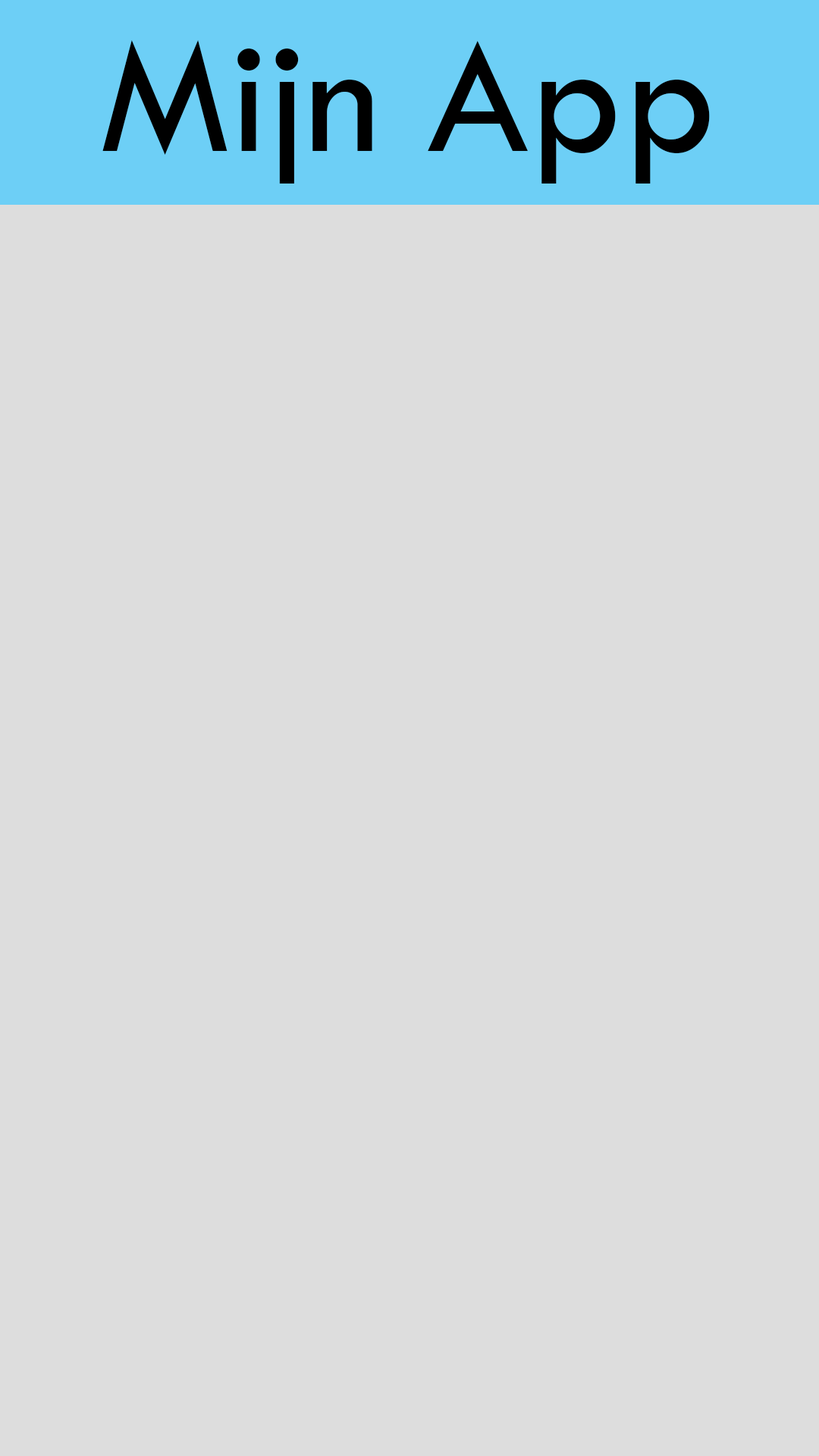
<style>
.page{position:relative;width:819px;height:1456px;background:#dddddd}
.page>*{position:absolute;margin:0}
.t1{font:170.6px "TwCenMT-Regular";color:#000000}
</style>
<div class="page">
<p class="t1" style="left:102px;top:40px;width:608px;height:144px">Mijn App</p>
</div>
